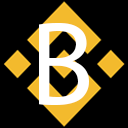
<style>
.page{position:relative;width:128px;height:128px;background:#000000}
.page>*{position:absolute;margin:0}
.t1{font:118.7px "MyriadPro-Regular";color:#ffffff}
</style>
<div class="page">
<p class="t1" style="left:39px;top:23px;width:50px;height:82px">B</p>
</div>
